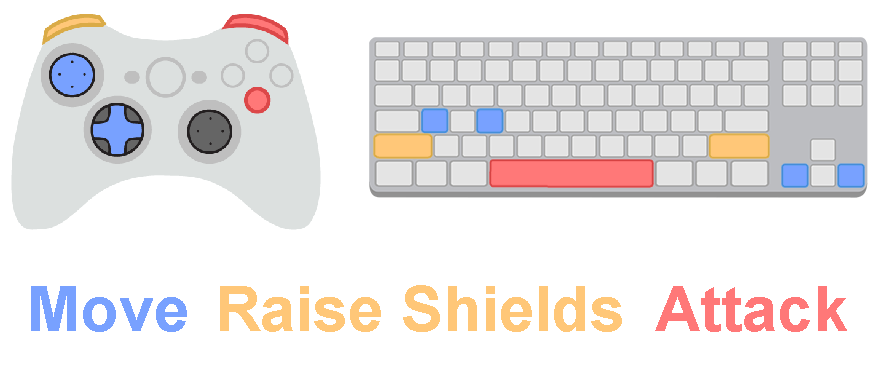
<style>
.page{position:relative;width:874px;height:371px;background:#ffffff}
.page>*{position:absolute;margin:0}
.t1{font:63.1px "Arial-BoldMT";color:#78a1ff}
.t2{font:63.1px "Arial-BoldMT";color:#ffc778}
.t3{font:63.1px "Arial-BoldMT";color:#ff7878}
</style>
<div class="page">
<p class="t1" style="left:31px;top:286px;width:156px;height:46px">Move</p>
<p class="t2" style="left:220px;top:285px;width:402px;height:47px">Raise Shields</p>
<p class="t3" style="left:655px;top:286px;width:192px;height:46px">Attack</p>
</div>
